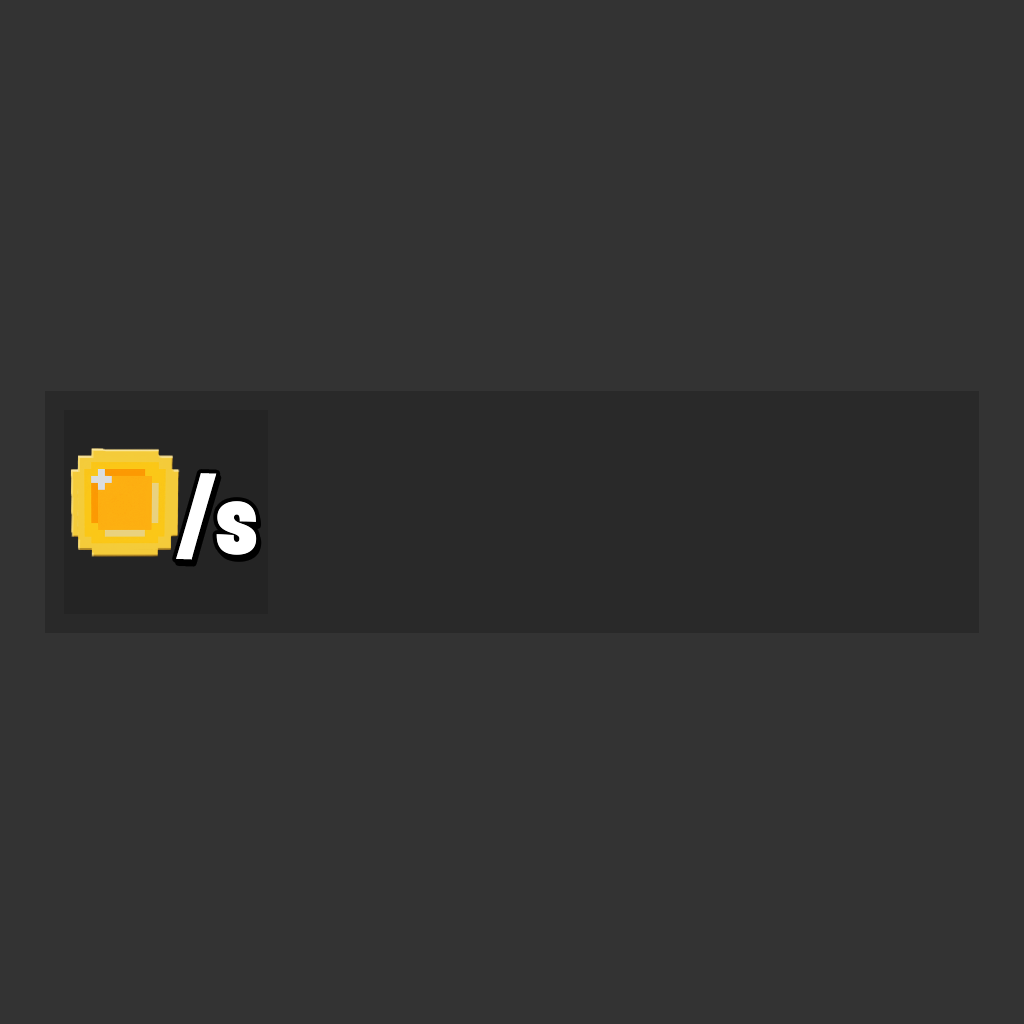
<style>
.page{position:relative;width:1024px;height:1024px;background:#333333}
.page>*{position:absolute;margin:0}
.t1{font:99.5px "BurbankBigCondensed-Black";color:#ffffff}
.t2{font:101.3px "BurbankBigCondensed-Black";color:#ffffff}
</style>
<div class="page">
<p class="t1" style="left:176px;top:473px;width:41px;height:87px;rotate:1deg">/</p>
<p class="t2" style="left:216px;top:501px;width:41px;height:54px">s</p>
</div>
